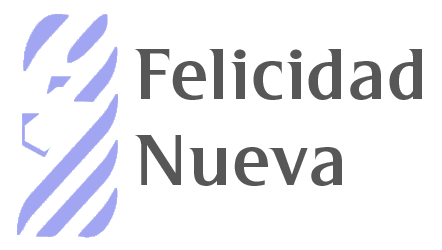
<style>
.page{position:relative;width:442px;height:250px;background:#ffffff}
.page>*{position:absolute;margin:0}
.t1{font:72px "Mart-SemiBold";color:#575757}
</style>
<div class="page">
<p class="t1" style="left:134px;top:49px;width:288px;height:137px">Felicidad Nueva</p>
</div>
